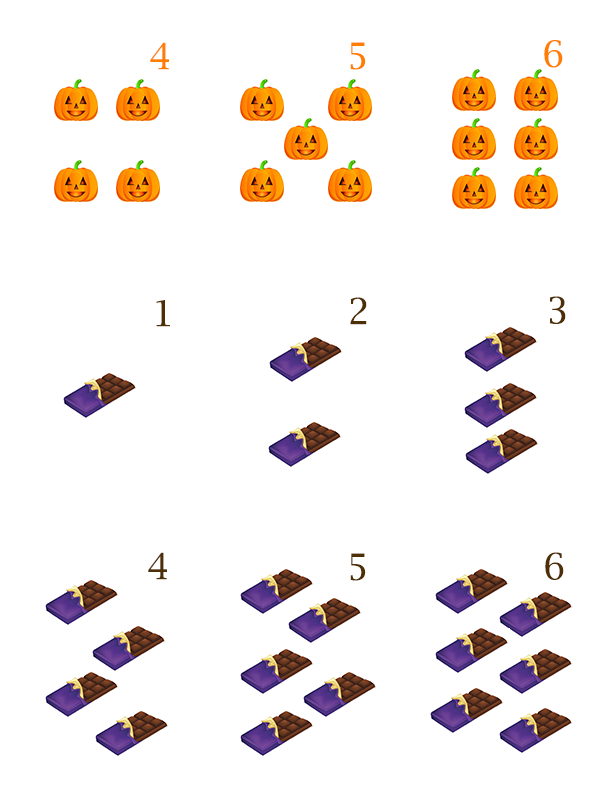
<style>
.page{position:relative;width:612px;height:792px;background:#ffffff}
.page>*{position:absolute;margin:0}
.t1{font:36px "LucidaBright";color:#ff7d00}
.t2{font:36px "LucidaBright";color:#4e2e04}
</style>
<div class="page">
<p class="t1" style="left:544px;top:40px;width:19px;height:28px">6</p>
<p class="t1" style="left:150px;top:42px;width:19px;height:28px">4</p>
<p class="t1" style="left:350px;top:42px;width:16px;height:28px">5</p>
<p class="t2" style="left:156px;top:300px;width:14px;height:27px">1</p>
<p class="t2" style="left:350px;top:297px;width:17px;height:28px">2</p>
<p class="t2" style="left:550px;top:296px;width:16px;height:28px">3</p>
<p class="t2" style="left:148px;top:552px;width:19px;height:28px">4</p>
<p class="t2" style="left:350px;top:553px;width:16px;height:28px">5</p>
<p class="t2" style="left:545px;top:552px;width:19px;height:28px">6</p>
</div>
